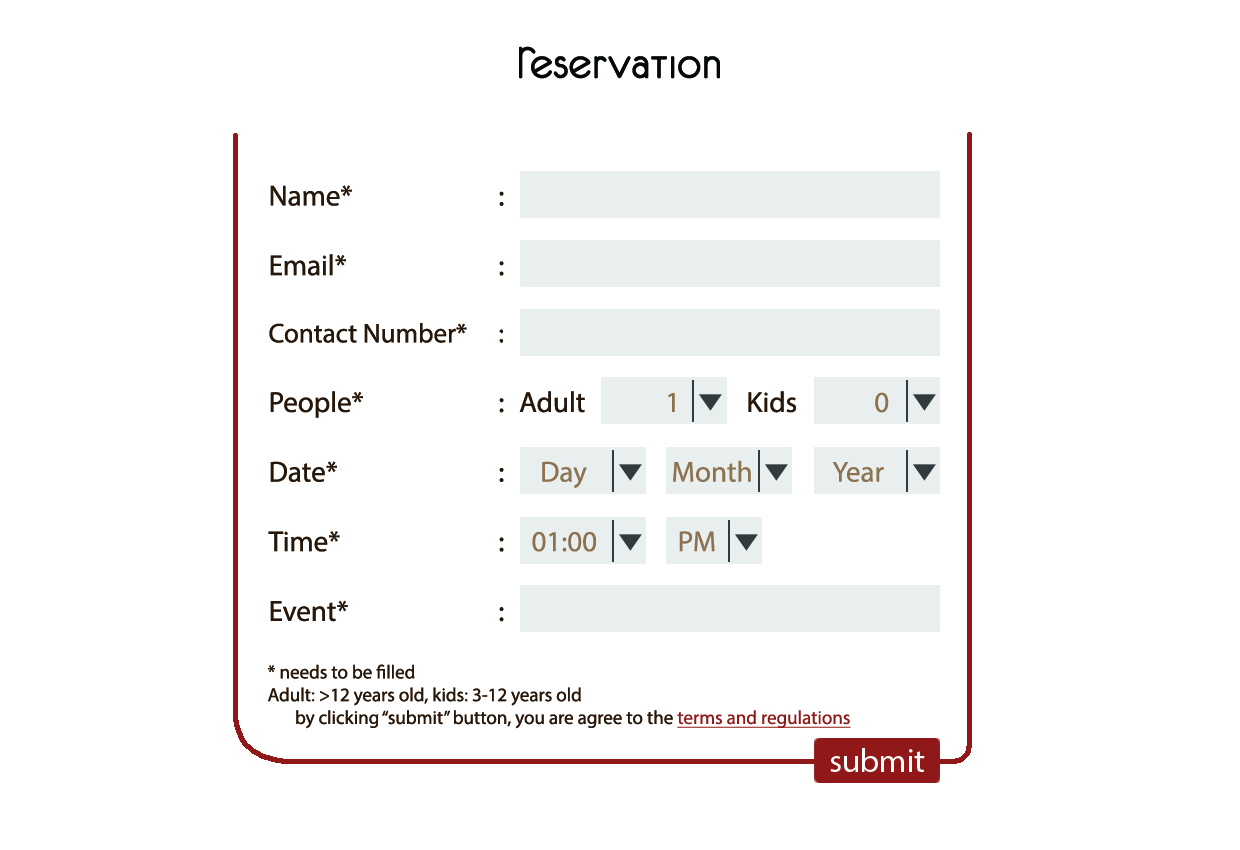
<style>
.page{position:relative;width:1240px;height:850px;background:#ffffff}
.page>*{position:absolute;margin:0}
.t1{font:50px "Unifur";color:#060808}
.t2{font:29px "MyriadPro-Regular";color:#24180d}
.t3{font:27px "MyriadPro-Regular";color:#24180d}
.t4{font:29px "MyriadPro-Regular";color:#8c714f}
.t5{font:29px "MyriadPro-Regular";color:#8c724f}
.t6{font:29px "MyriadPro-Regular";color:#8c7251}
.t7{font:19px "MyriadPro-Regular";color:#24180d}
.t8{font:19px "MyriadPro-Regular";color:#901818;text-decoration:underline}
.t9{font:33.2px "MyriadPro-Regular";color:#ffffff}
</style>
<div class="page">
<p class="t1" style="left:519px;top:46px;width:201px;height:33px">Reservation</p>
<p class="t2" style="left:268px;top:185px;width:621px;height:437px">Name*       :<br><br>Email*        :<br><br><span class="t3">Contact Number*  :<br></span><br>People*       : Adult    <span class="t4">1</span>      Kids    <span class="t5">0<br></span><br>Date*        :  <span class="t5">Day     Month    Year<br></span><br>Time*         :   <span class="t6">01:00      PM </span>                    <br><br>Event*        :</p>
<p class="t7" style="left:268px;top:664px;width:583px;height:65px">* needs to be filled<br>Adult: &gt;12 years old, kids: 3-12 years old<br>  by clicking “submit” button, you are agree to the <span class="t8">terms and regulations</span></p>
<p class="t9" style="left:830px;top:748px;width:95px;height:24px">submit</p>
</div>
